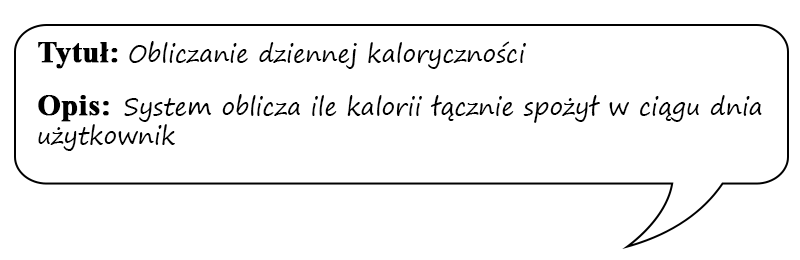
<style>
.page{position:relative;width:800px;height:260px;background:#ffffff}
.page>*{position:absolute;margin:0}
.t1{font:24px "SegoePrint";color:#000000}
.t2{font:30px "TimesNewRomanPS-BoldMT";color:#000000;font-weight:bold}
</style>
<div class="page">
<p class="t1" style="left:38px;top:41px;width:724px;height:110px"><span class="t2">Tytuł: </span>Obliczanie dziennej kaloryczności<br><br><span class="t2">Opis:  </span>System oblicza ile kalorii łącznie spożył w ciągu dnia użytkownik</p>
</div>
